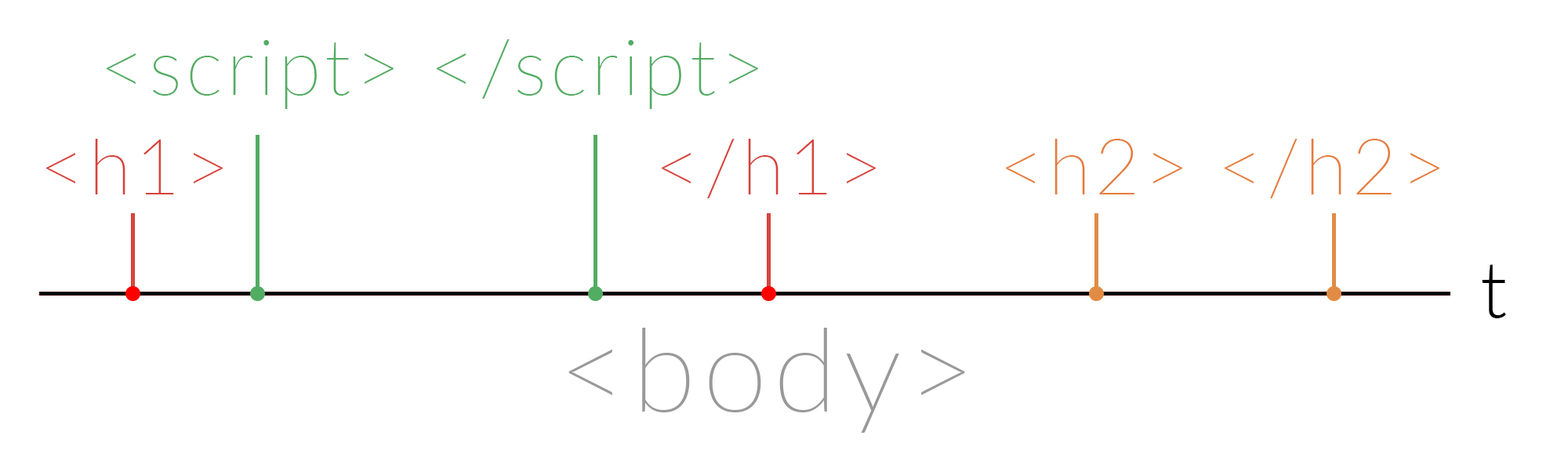
<style>
.page{position:relative;width:1568px;height:450px;background:#ffffff}
.page>*{position:absolute;margin:0}
.t1{font:78.4px "Lato-Thin";letter-spacing:0.05em;color:#52ac62}
.t2{font:78.4px "Lato-Thin";letter-spacing:0.05em;color:#d7423b}
.t3{font:78.4px "Lato-Thin";letter-spacing:0.05em;color:#e57b3c}
.t4{font:78.4px "Lato-Light";letter-spacing:0.05em;color:#000000}
.t5{font:117.6px "Lato-Thin";letter-spacing:0.05em;color:#999999}
</style>
<div class="page">
<p class="t1" style="left:107px;top:40px;width:287px;height:69px">&lt;script&gt;</p>
<p class="t1" style="left:437px;top:39px;width:321px;height:70px">&lt;/script&gt;</p>
<p class="t2" style="left:46px;top:139px;width:177px;height:55px">&lt;h1&gt;</p>
<p class="t2" style="left:662px;top:139px;width:214px;height:59px">&lt;/h1&gt;</p>
<p class="t3" style="left:1006px;top:139px;width:176px;height:55px">&lt;h2&gt;</p>
<p class="t3" style="left:1225px;top:139px;width:214px;height:59px">&lt;/h2&gt;</p>
<p class="t4" style="left:1482px;top:264px;width:24px;height:54px">t</p>
<p class="t5" style="left:568px;top:328px;width:397px;height:105px">&lt;body&gt;</p>
</div>
